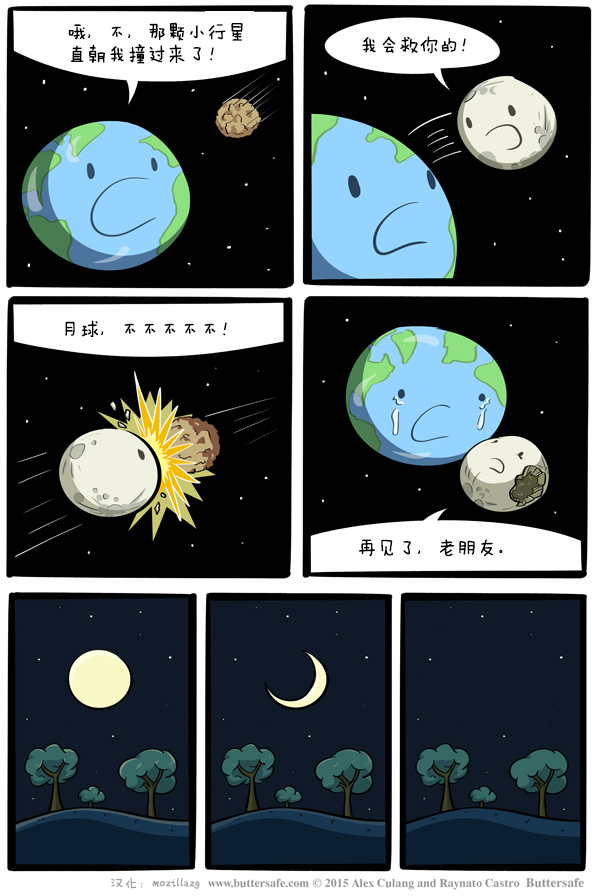
<style>
.page{position:relative;width:595px;height:896px;background:#000000}
.page>*{position:absolute;margin:0}
.t1{font:20px/22px "FZMWJW--GB1-0";color:#000000}
.t2{font:20px "FZMWJW--GB1-0";color:#000000}
.t3{font:14px "FZMWJW--GB1-0";color:#9f9f9f}
</style>
<div class="page">
<p class="t1" style="left:68px;top:22px;width:175px;height:42px">哦，不，那颗小行星<br>直朝我撞过来了！</p>
<p class="t2" style="left:362px;top:36px;width:104px;height:18px">我会救你的！</p>
<p class="t2" style="left:65px;top:320px;width:162px;height:17px">月球，不不不不不！</p>
<p class="t2" style="left:359px;top:539px;width:144px;height:18px">再见了，老朋友。</p>
<p class="t3" style="left:111px;top:877px;width:89px;height:12px">汉化：mozillazg</p>
</div>
